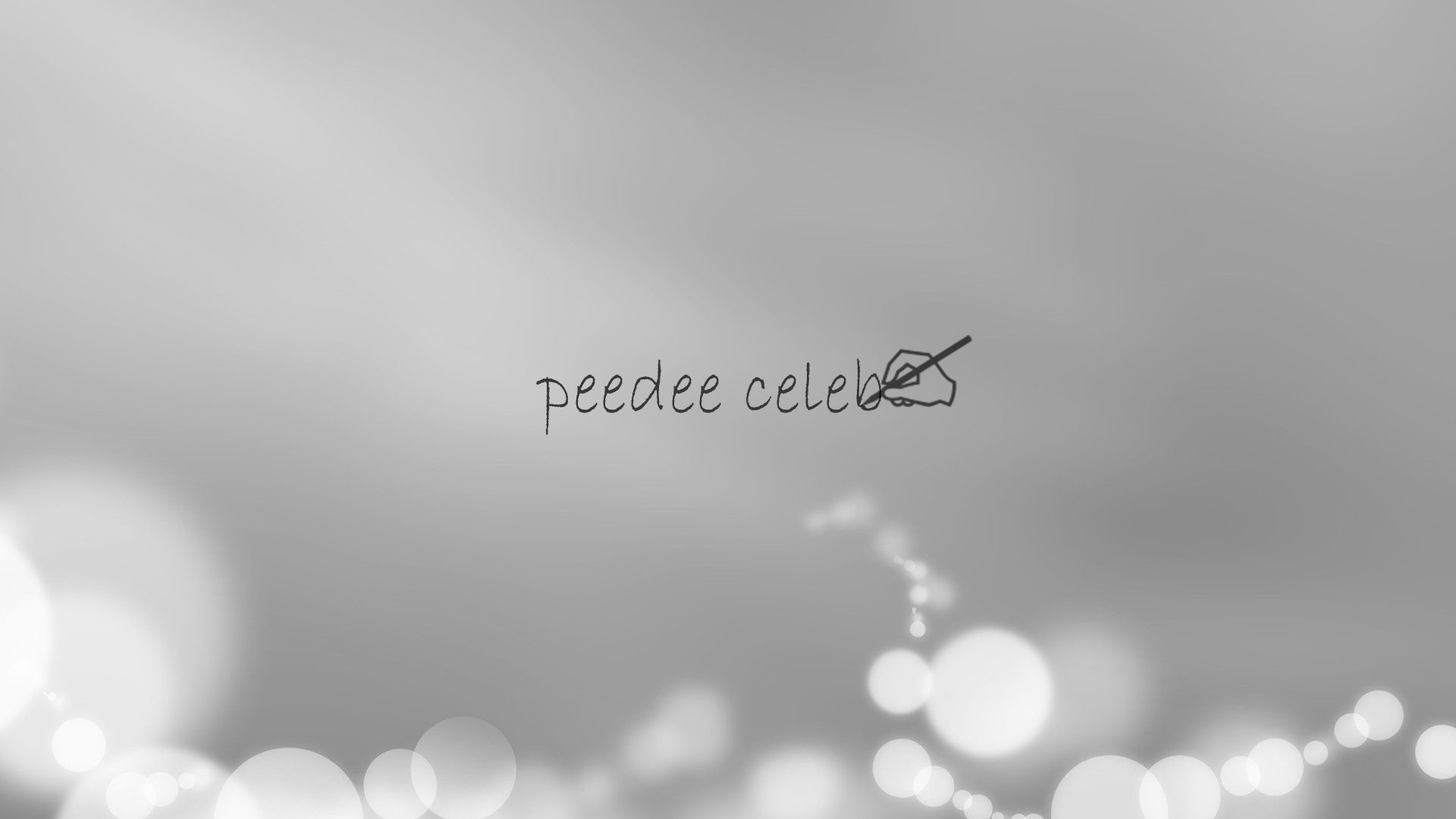
<style>
.page{position:relative;width:1456px;height:819px}
.page>*{position:absolute;margin:0}
.t1{font:75.8px "BradleyHandITC";color:#363636}
</style>
<div class="page">
<p class="t1" style="left:536px;top:358px;width:345px;height:77px">peedee celeb</p>
</div>
